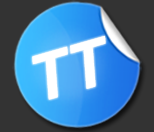
<style>
.page{position:relative;width:154px;height:132px;background:#333333}
.page>*{position:absolute;margin:0}
.t1{font:64.6px "Arial-BoldItalicMT";color:#ffffff}
</style>
<div class="page">
<p class="t1" style="left:32px;top:35px;width:74px;height:65px;rotate:-16deg">TT</p>
</div>
